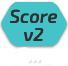
<style>
.page{position:relative;width:68px;height:66px;background:#44c4c8}
.page>*{position:absolute;margin:0}
.t1{font:18px "Exo2-MediumItalic";color:#303030;font-weight:bold}
.t2{font:18px "Exo2-MediumItalic";color:#ffffff;font-weight:bold}
</style>
<div class="page">
<p class="t1" style="left:10px;top:9px;width:47px;height:32px;text-align:center">Score<br>v2</p>
<p class="t1" style="left:10px;top:9px;width:47px;height:32px;text-align:center">Score<br>v2</p>
<p class="t2" style="left:28px;top:59px;width:12px;height:3px">...</p>
</div>
